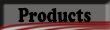
<style>
.page{position:relative;width:110px;height:30px;background:#696666}
.page>*{position:absolute;margin:0}
.t1{font:20px "CooperBlackStd";color:#000000;scale:0.75 1}
</style>
<div class="page">
<p class="t1" style="left:18px;top:7px;width:73px;height:16px">Products</p>
</div>
